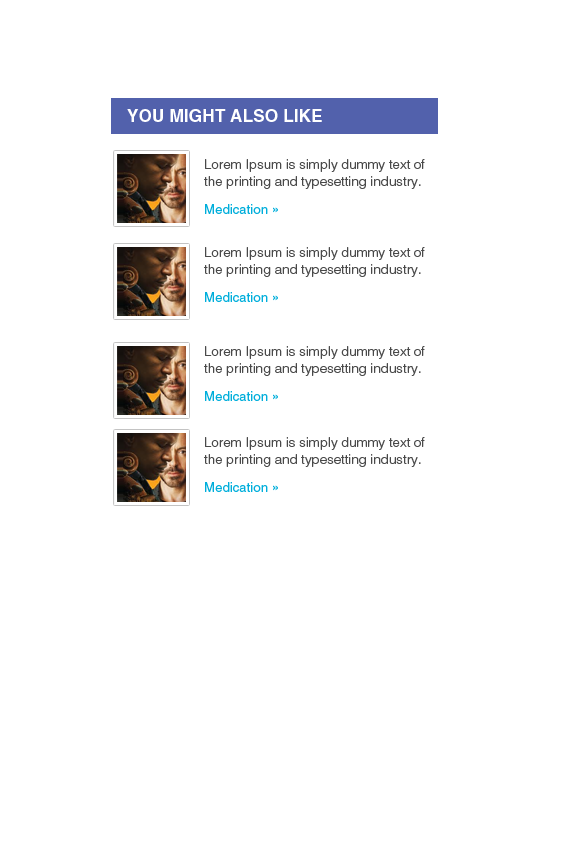
<style>
.page{position:relative;width:567px;height:850px;background:#ffffff}
.page>*{position:absolute;margin:0}
.t1{font:17px "HelveticaLTStd-Bold";color:#ffffff;text-transform:uppercase}
.t2{font:13px/17px "HelveticaLTStd-Light";color:#494949}
.t3{font:13px/28px "HelveticaLTStd-Roman";color:#00aedb}
</style>
<div class="page">
<p class="t1" style="left:127px;top:109px;width:195px;height:13px">YOU MIGHT ALSO LIKE</p>
<p class="t2" style="left:204px;top:159px;width:221px;height:55px">Lorem Ipsum is simply dummy text of the printing and typesetting industry. <span class="t3">Medication »</span></p>
<p class="t2" style="left:204px;top:247px;width:221px;height:55px">Lorem Ipsum is simply dummy text of the printing and typesetting industry. <span class="t3">Medication »</span></p>
<p class="t2" style="left:204px;top:346px;width:221px;height:55px">Lorem Ipsum is simply dummy text of the printing and typesetting industry. <span class="t3">Medication »</span></p>
<p class="t2" style="left:204px;top:437px;width:221px;height:55px">Lorem Ipsum is simply dummy text of the printing and typesetting industry. <span class="t3">Medication »</span></p>
</div>
